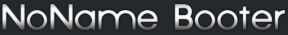
<style>
.page{position:relative;width:288px;height:35px;background:#24292d}
.page>*{position:absolute;margin:0}
.t1{font:30px "Criticized"}
</style>
<div class="page">
<p class="t1" style="left:2px;top:4px;width:283px;height:27px">NoName Booter</p>
</div>
